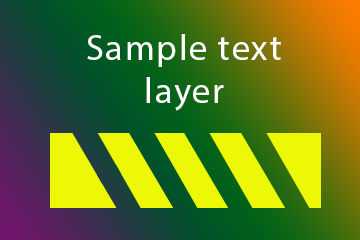
<style>
.page{position:relative;width:360px;height:240px}
.page>*{position:absolute;margin:0}
.t1{font:36px "MyriadPro-Regular";letter-spacing:0.05em;color:#ffffff}
</style>
<div class="page">
<p class="t1" style="left:87px;top:34px;width:194px;height:77px;text-align:center">Sample text layer</p>
</div>
